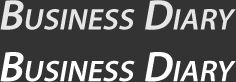
<style>
.page{position:relative;width:236px;height:82px;background:#333333}
.page>*{position:absolute;margin:0}
.t1{font:43px "MyriadPro-Semibold";color:#e6e6e6;font-variant:small-caps;font-style:italic}
.t2{font:43px "MyriadPro-Semibold";color:#ffffff;font-variant:small-caps;font-style:italic}
</style>
<div class="page">
<p class="t1" style="left:0px;top:0px;width:236px;height:82px;text-align:center">Business Diary<br><span class="t2">Business Diary</span></p>
</div>
